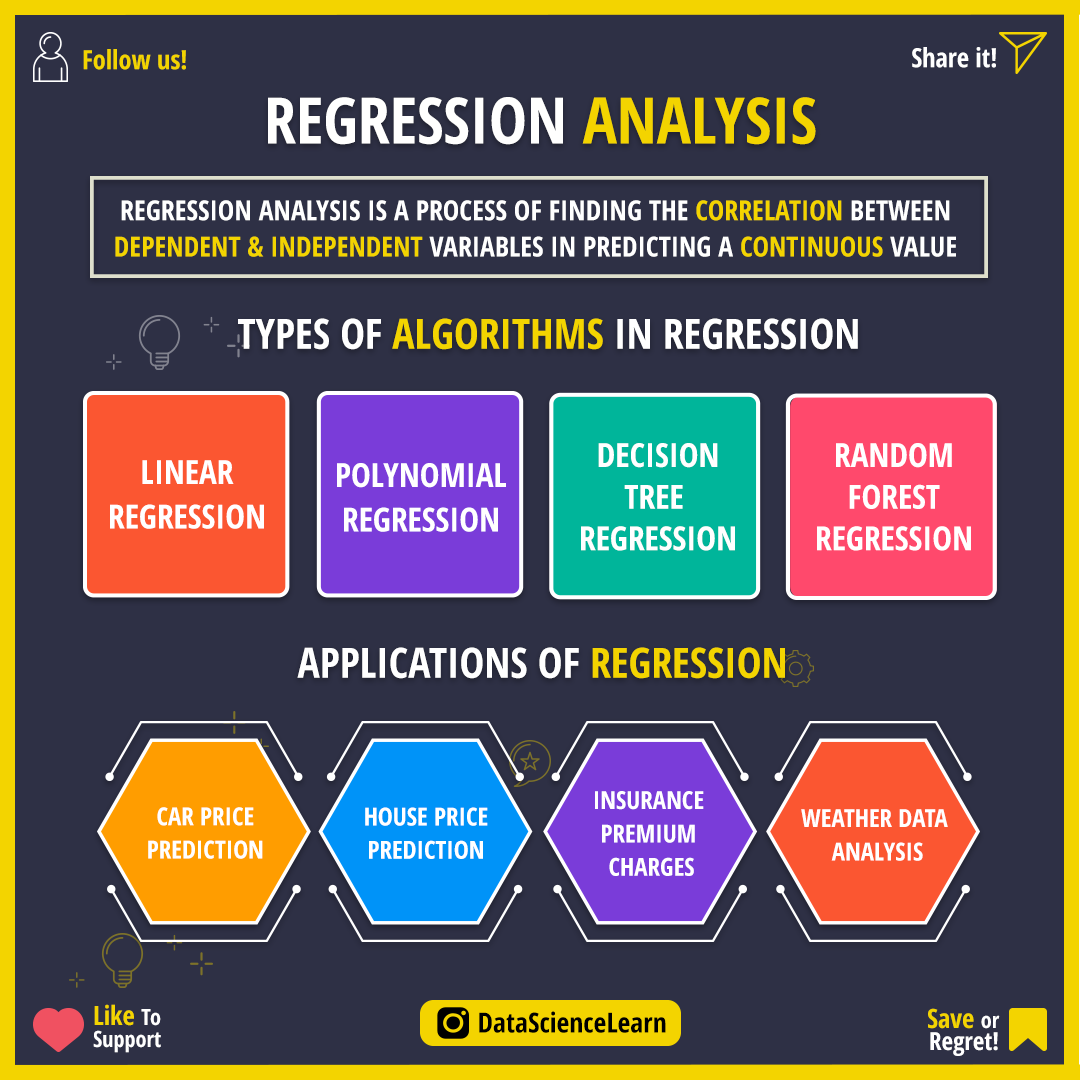
<style>
.page{position:relative;width:1080px;height:1080px;background:#2e3045}
.page>*{position:absolute;margin:0}
.t1{font:26.4px "OpenSans-CondensedBold";color:#f3d400}
.t2{font:26.4px "OpenSans-CondensedBold";color:#ffffff}
.t3{font:63.9px "OpenSans-CondensedBold";color:#fffffe}
.t4{font:63.9px "OpenSans-CondensedBold";color:#f3d400}
.t5{font:27.8px/36.1px "OpenSans-CondensedBold";color:#ffffff}
.t6{font:27.8px/36.1px "OpenSans-CondensedBold";color:#f3d400}
.t7{font:41.7px "OpenSans-CondensedBold";color:#ffffff}
.t8{font:41.7px "OpenSans-CondensedBold";color:#f3d400}
.t9{font:33.3px/41.7px "OpenSans-CondensedBold";color:#ffffff}
.t10{font:33.3px/44.4px "OpenSans-CondensedBold";color:#ffffff}
.t11{font:25px/33.3px "OpenSans-CondensedBold";color:#ffffff}
.t12{font:22.2px/22.2px "OpenSans-CondensedBold";color:#ffffff}
.t13{font:26.4px/22.2px "OpenSans-CondensedBold";color:#f3d400}
.t14{font:27.8px "OpenSans-CondensedBold";color:#000000}
.t15{font:25px/22.2px "OpenSans-CondensedBold";color:#ffffff}
</style>
<div class="page">
<p class="t1" style="left:83px;top:49px;width:103px;height:21px">Follow us!</p>
<p class="t2" style="left:912px;top:47px;width:84px;height:21px">Share it!</p>
<p class="t3" style="left:268px;top:97px;width:548px;height:48px">REGRESSION <span class="t4">ANALYSIS</span></p>
<p class="t5" style="left:115px;top:200px;width:841px;height:57px;text-align:center">REGRESSION ANALYSIS IS A PROCESS OF FINDING THE <span class="t6">CORRELATION </span>BETWEEN<br><span class="t6">DEPENDENT &amp; INDEPENDENT</span> VARIABLES IN PREDICTING A <span class="t6">CONTINUOUS </span>VALUE</p>
<p class="t7" style="left:238px;top:318px;width:620px;height:32px">TYPES OF <span class="t8">ALGORITHMS </span>IN REGRESSION</p>
<p class="t9" style="left:581px;top:443px;width:154px;height:108px;text-align:center">DECISION<br>TREE <br>REGRESSION</p>
<p class="t9" style="left:817px;top:443px;width:154px;height:108px;text-align:center">RANDOM<br>FOREST<br>REGRESSION</p>
<p class="t10" style="left:110px;top:460px;width:154px;height:69px;text-align:center">LINEAR<br>REGRESSION</p>
<p class="t10" style="left:337px;top:463px;width:169px;height:69px;text-align:center">POLYNOMIAL<br>REGRESSION</p>
<p class="t7" style="left:297px;top:647px;width:488px;height:32px">APPLICATIONS OF <span class="t8">REGRESSION</span></p>
<p class="t11" style="left:595px;top:791px;width:109px;height:85px;text-align:center">INSURANCE <br>PREMIUM <br>CHARGES</p>
<p class="t11" style="left:148px;top:807px;width:115px;height:52px;text-align:center">CAR PRICE<br>PREDICTION</p>
<p class="t11" style="left:365px;top:807px;width:123px;height:52px;text-align:center">HOUSE PRICE<br>PREDICTION</p>
<p class="t11" style="left:801px;top:809px;width:147px;height:52px;text-align:center">WEATHER DATA <br>ANALYSIS</p>
<p class="t12" style="left:93px;top:1004px;width:68px;height:49px"><span class="t13">Like </span>To<br>Support</p>
<p class="t14" style="left:479px;top:1011px;width:187px;height:22px">DataScienceLearn</p>
<p class="t15" style="left:928px;top:1008px;width:72px;height:48px;text-align:right"><span class="t13">Save </span><span class="t12">or<br></span>Regret!</p>
</div>
